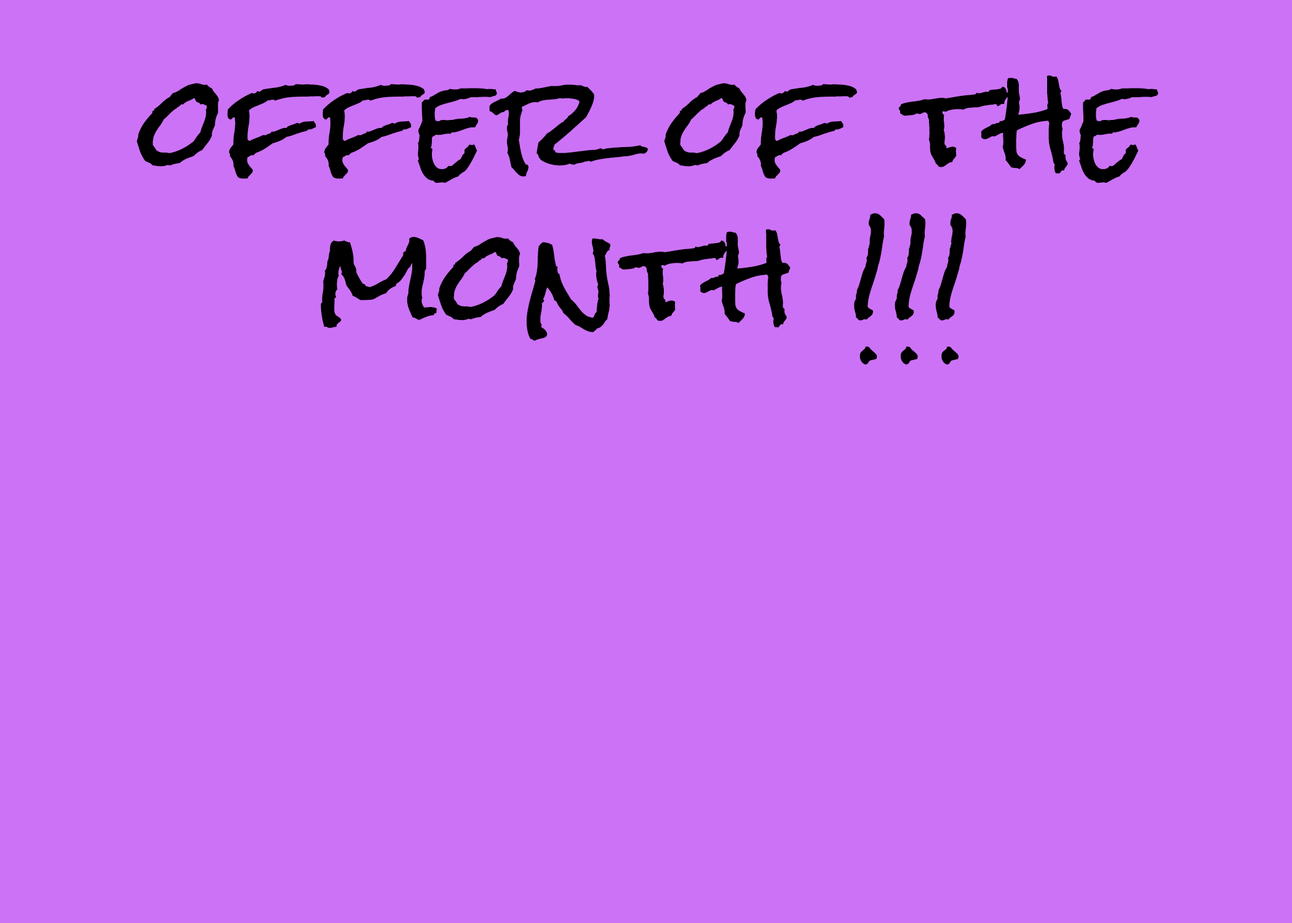
<style>
.page{position:relative;width:1292px;height:923px;background:#cc72f6}
.page>*{position:absolute;margin:0}
.t1{font:123.1px/153.8px "RockSalt";letter-spacing:0.025em;color:#000000}
</style>
<div class="page">
<p class="t1" style="left:137px;top:75px;width:1022px;height:290px;text-align:center">offer of the month !!!</p>
</div>
